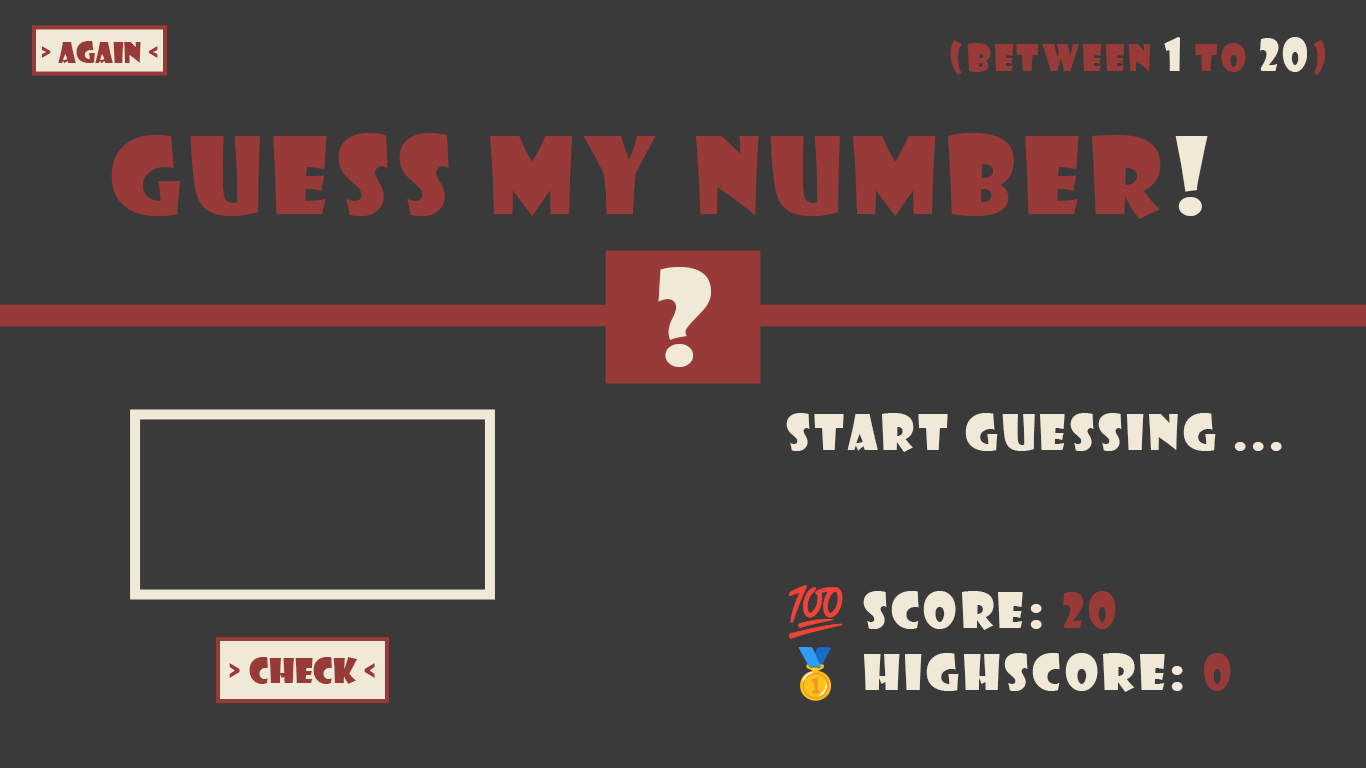
<style>
.page{position:relative;width:1366px;height:768px;background:#3a3a3a}
.page>*{position:absolute;margin:0}
.t1{font:28.4px "ShowcardGothic-Reg";color:#983a38}
.t2{font:36px "ShowcardGothic-Reg";letter-spacing:0.08em;color:#983a38}
.t3{font:44px "ShowcardGothic-Reg";letter-spacing:0.08em;color:#f0e9d7}
.t4{font:104.4px "ShowcardGothic-Reg";letter-spacing:0.08em;color:#983a38}
.t5{font:104.4px "ShowcardGothic-Reg";letter-spacing:0.08em;color:#f0e9d7}
.t6{font:125px "ShowcardGothic-Reg";letter-spacing:0.08em;color:#f0e9d7}
.t7{font:48.1px/89.4px "ShowcardGothic-Reg";letter-spacing:0.08em;color:#f0e9d7}
.t8{font:48.1px/89.4px "NotoColorEmoji-SVG";letter-spacing:0.08em;color:#f0e9d7}
.t9{font:48.1px/89.4px "ShowcardGothic-Reg";letter-spacing:0.08em;color:#983a38}
.t10{font:48.1px/30.9px "NotoColorEmoji-SVG";letter-spacing:0.08em;color:#f0e9d7}
.t11{font:48.1px/30.9px "ShowcardGothic-Reg";letter-spacing:0.08em;color:#f0e9d7}
.t12{font:48.1px/30.9px "ShowcardGothic-Reg";letter-spacing:0.08em;color:#983a38}
.t13{font:33px "ShowcardGothic-Reg";color:#983a38}
</style>
<div class="page">
<p class="t1" style="left:41px;top:41px;width:117px;height:23px">again &lt;</p>
<p class="t2" style="left:950px;top:37px;width:375px;height:38px">(between <span class="t3">1</span> to <span class="t3">20</span>)</p>
<p class="t4" style="left:111px;top:133px;width:1097px;height:86px">Guess my number<span class="t5">!</span></p>
<p class="t6" style="left:658px;top:267px;width:53px;height:100px">?</p>
<p class="t7" style="left:786px;top:413px;width:496px;height:288px">START GUESSING ...<br><br><span class="t8">💯</span> Score: <span class="t9">20<br><br></span><span class="t10">🥇</span><span class="t11"> Highscore:</span><span class="t12"> 0</span></p>
<p class="t13" style="left:229px;top:657px;width:146px;height:27px">check &lt;</p>
</div>
